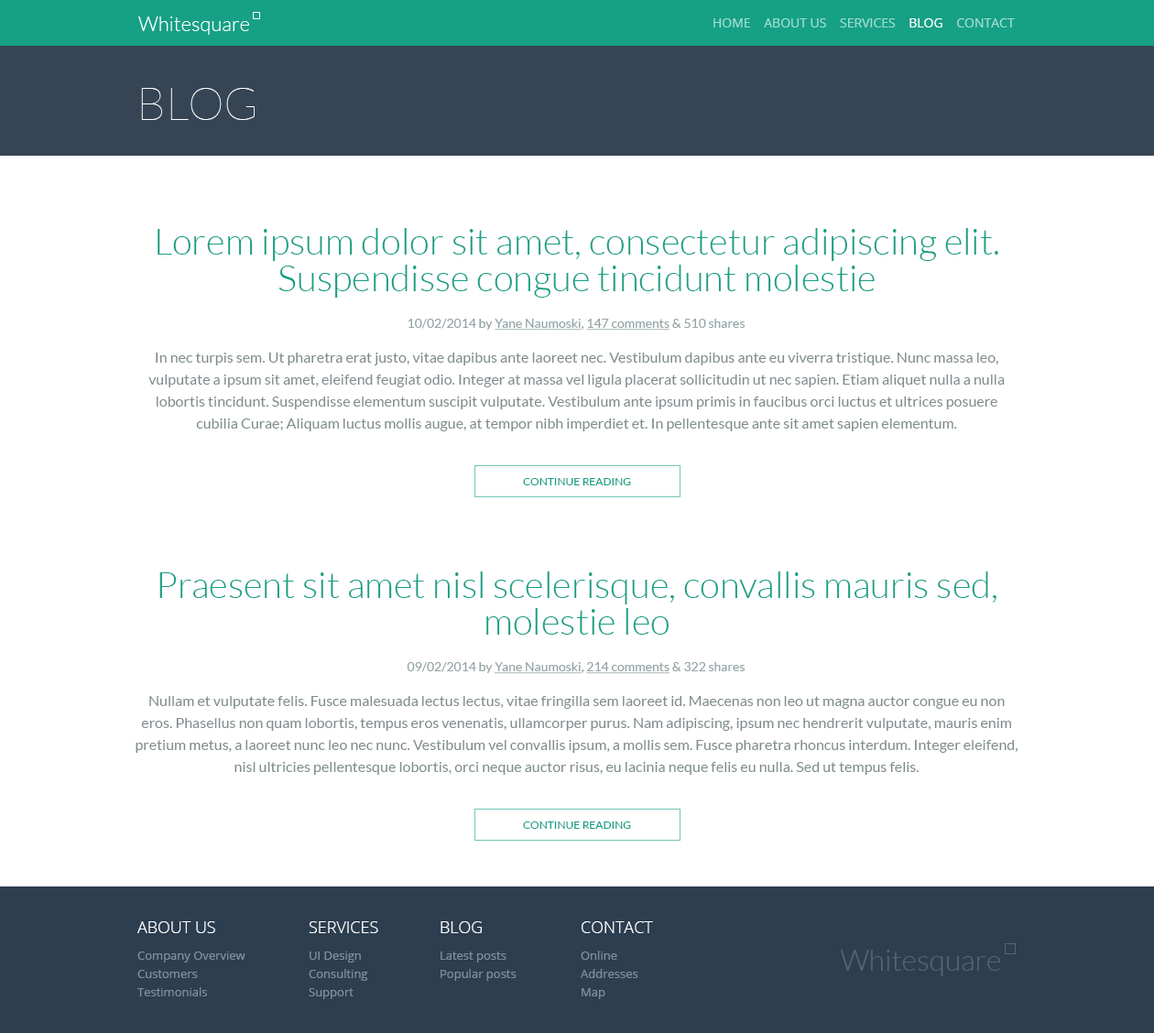
<style>
.page{position:relative;width:1154px;height:1033px;background:#ffffff}
.page>*{position:absolute;margin:0}
.t1{font:12.8px "OpenSans";color:#9bded1;text-transform:uppercase}
.t2{font:12.8px "OpenSans";color:#ffffff;text-transform:uppercase}
.t3{font:45.8px "Lato-Hairline";color:#ffffff;text-transform:uppercase}
.t4{font:36.6px/36.6px "Lato-Light";color:#16a085}
.t5{font:12.8px "Lato-Regular";color:#95a5a6}
.t6{font:12.8px "Lato-Regular";color:#95a5a6;text-decoration:underline}
.t7{font:14.7px/22px "Lato-Regular";color:#7f8c8d}
.t8{font:11px "Lato-Regular";color:#16a085;text-transform:uppercase}
.t9{font:16.5px "OpenSans-Light";color:#ffffff;text-transform:uppercase}
.t10{font:11.9px/18.3px "OpenSans";color:#7f8e9c}
</style>
<div class="page">
<p class="t1" style="left:714px;top:18px;width:301px;height:9px">home    about us    services    <span class="t2">blog</span>    contact</p>
<p class="t3" style="left:141px;top:88px;width:114px;height:32px">Blog</p>
<p class="t4" style="left:158px;top:228px;width:840px;height:70px;text-align:center">Lorem ipsum dolor sit amet, consectetur adipiscing elit. Suspendisse congue tincidunt molestie</p>
<p class="t5" style="left:408px;top:319px;width:338px;height:12px">10/02/2014 by <span class="t6">Yane Naumoski</span>, <span class="t6">147 comments</span> &amp; 510 shares</p>
<p class="t7" style="left:148px;top:353px;width:857px;height:78px;text-align:center">In nec turpis sem. Ut pharetra erat justo, vitae dapibus ante laoreet nec. Vestibulum dapibus ante eu viverra tristique. Nunc massa leo, vulputate a ipsum sit amet, eleifend feugiat odio. Integer at massa vel ligula placerat sollicitudin ut nec sapien. Etiam aliquet nulla a nulla lobortis tincidunt. Suspendisse elementum suscipit vulputate. Vestibulum ante ipsum primis in faucibus orci luctus et ultrices posuere cubilia Curae; Aliquam luctus mollis augue, at tempor nibh imperdiet et. In pellentesque ante sit amet sapien elementum.</p>
<p class="t8" style="left:523px;top:478px;width:108px;height:7px">continue reading</p>
<p class="t4" style="left:159px;top:572px;width:838px;height:63px;text-align:center">Praesent sit amet nisl scelerisque, convallis mauris sed, molestie leo</p>
<p class="t5" style="left:407px;top:662px;width:339px;height:12px">09/02/2014 by <span class="t6">Yane Naumoski</span>, <span class="t6">214 comments</span> &amp; 322 shares</p>
<p class="t7" style="left:136px;top:696px;width:882px;height:79px;text-align:center">Nullam et vulputate felis. Fusce malesuada lectus lectus, vitae fringilla sem laoreet id. Maecenas non leo ut magna auctor congue eu non eros. Phasellus non quam lobortis, tempus eros venenatis, ullamcorper purus. Nam adipiscing, ipsum nec hendrerit vulputate, mauris enim pretium metus, a laoreet nunc leo nec nunc. Vestibulum vel convallis ipsum, a mollis sem. Fusce pharetra rhoncus interdum. Integer eleifend, nisl ultricies pellentesque lobortis, orci neque auctor risus, eu lacinia neque felis eu nulla. Sed ut tempus felis.</p>
<p class="t8" style="left:523px;top:822px;width:108px;height:7px">continue reading</p>
<p class="t9" style="left:137px;top:921px;width:78px;height:12px">about us</p>
<p class="t9" style="left:309px;top:921px;width:69px;height:12px">Services</p>
<p class="t9" style="left:441px;top:921px;width:41px;height:12px">Blog</p>
<p class="t9" style="left:582px;top:921px;width:71px;height:12px">Contact</p>
<p class="t10" style="left:137px;top:952px;width:108px;height:45px">Company Overview<br>Customers<br>Testimonials</p>
<p class="t10" style="left:309px;top:952px;width:59px;height:47px">UI Design<br>Consulting<br>Support</p>
<p class="t10" style="left:441px;top:952px;width:76px;height:29px">Latest posts<br>Popular posts</p>
<p class="t10" style="left:581px;top:951px;width:57px;height:48px">Online<br>Addresses<br>Map</p>
</div>
